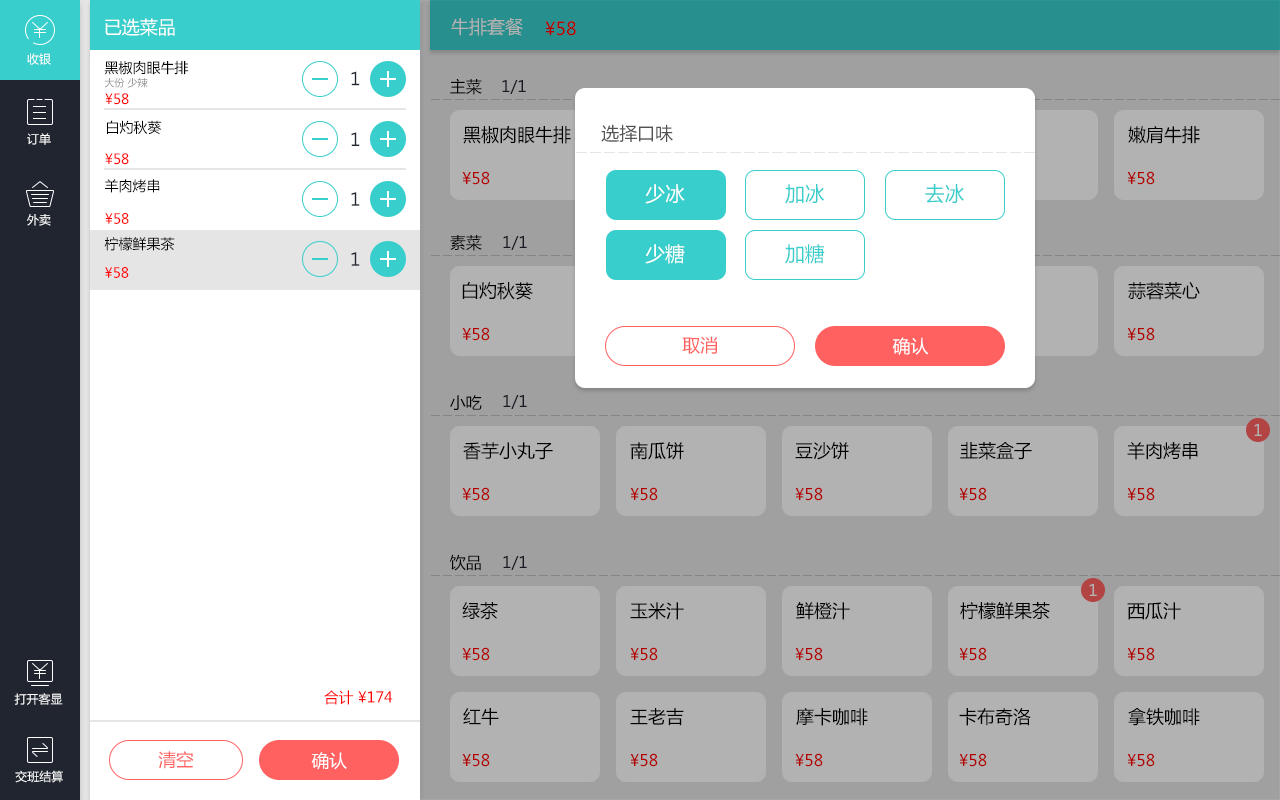
<style>
.page{position:relative;width:1280px;height:800px;background:#ffffff}
.page>*{position:absolute;margin:0}
.t1{font:18px "MicrosoftYaHei";color:#ffffff}
.t2{font:18px "MicrosoftYaHei";color:#b2b2b2}
.t3{font:18px "MicrosoftYaHei";color:#b20000}
.t4{font:12px "MicrosoftYaHei";color:#ffffff}
.t5{font:14px "MicrosoftYaHei";color:#000000}
.t6{font:10px "MicrosoftYaHei";color:#959595}
.t7{font:17.8px "MicrosoftYaHei";color:#212530}
.t8{font:16px "MicrosoftYaHei";color:#000000}
.t9{font:16px "MicrosoftYaHei";color:#212530}
.t10{font:14px "MicrosoftYaHei";color:#ff0000}
.t11{font:18px "MicrosoftYaHei";color:#000000}
.t12{font:18px "MicrosoftYaHei";color:#535353}
.t13{font:16px "MicrosoftYaHei";color:#b20000}
.t14{font:20px "MicrosoftYaHei";color:#ffffff}
.t15{font:20px "MicrosoftYaHei";color:#38cecc}
.t16{font:18px "MicrosoftYaHei";color:#ff6160}
.t17{font:16px "MicrosoftYaHei";color:#b2b2b2}
.t18{font:14.8px "MicrosoftYaHei";color:#ff0000}
.t19{font:17.8px "MicrosoftYaHei";color:#ff6160}
.t20{font:17.8px "MicrosoftYaHei";color:#ffffff}
</style>
<div class="page">
<p class="t1" style="left:105px;top:18px;width:70px;height:18px">已选菜品</p>
<p class="t2" style="left:451px;top:18px;width:72px;height:18px">牛排套餐</p>
<p class="t3" style="left:545px;top:21px;width:31px;height:15px">¥58</p>
<p class="t4" style="left:27px;top:53px;width:24px;height:12px">收银</p>
<p class="t5" style="left:104px;top:60px;width:85px;height:15px">黑椒肉眼牛排</p>
<p class="t6" style="left:104px;top:78px;width:44px;height:10px">大份 少辣</p>
<p class="t7" style="left:351px;top:71px;width:9px;height:15px">1</p>
<p class="t8" style="left:450px;top:78px;width:32px;height:17px">主菜</p>
<p class="t9" style="left:502px;top:79px;width:24px;height:15px">1/1</p>
<p class="t10" style="left:105px;top:93px;width:24px;height:12px">¥58</p>
<p class="t5" style="left:107px;top:120px;width:55px;height:15px">白灼秋葵</p>
<p class="t11" style="left:463px;top:126px;width:108px;height:18px">黑椒肉眼牛排</p>
<p class="t12" style="left:601px;top:124px;width:72px;height:18px">选择口味</p>
<p class="t11" style="left:1128px;top:126px;width:72px;height:18px">嫩肩牛排</p>
<p class="t4" style="left:27px;top:133px;width:24px;height:12px">订单</p>
<p class="t7" style="left:351px;top:132px;width:9px;height:14px">1</p>
<p class="t10" style="left:105px;top:153px;width:24px;height:12px">¥58</p>
<p class="t13" style="left:462px;top:171px;width:28px;height:14px">¥58</p>
<p class="t13" style="left:1127px;top:171px;width:28px;height:14px">¥58</p>
<p class="t5" style="left:105px;top:179px;width:55px;height:14px">羊肉烤串</p>
<p class="t14" style="left:645px;top:184px;width:40px;height:20px">少冰</p>
<p class="t15" style="left:785px;top:184px;width:40px;height:20px">加冰</p>
<p class="t15" style="left:925px;top:184px;width:39px;height:20px">去冰</p>
<p class="t7" style="left:351px;top:192px;width:9px;height:14px">1</p>
<p class="t4" style="left:27px;top:214px;width:24px;height:12px">外卖</p>
<p class="t10" style="left:105px;top:213px;width:24px;height:11px">¥58</p>
<p class="t5" style="left:104px;top:237px;width:71px;height:14px">柠檬鲜果茶</p>
<p class="t8" style="left:450px;top:235px;width:32px;height:16px">素菜</p>
<p class="t9" style="left:503px;top:235px;width:24px;height:15px">1/1</p>
<p class="t14" style="left:645px;top:244px;width:40px;height:20px">少糖</p>
<p class="t15" style="left:785px;top:244px;width:40px;height:20px">加糖</p>
<p class="t7" style="left:351px;top:252px;width:9px;height:14px">1</p>
<p class="t10" style="left:105px;top:267px;width:24px;height:11px">¥58</p>
<p class="t11" style="left:462px;top:281px;width:71px;height:19px">白灼秋葵</p>
<p class="t11" style="left:1128px;top:282px;width:72px;height:18px">蒜蓉菜心</p>
<p class="t13" style="left:462px;top:327px;width:28px;height:14px">¥58</p>
<p class="t13" style="left:1127px;top:327px;width:28px;height:14px">¥58</p>
<p class="t16" style="left:682px;top:336px;width:36px;height:18px">取消</p>
<p class="t1" style="left:892px;top:337px;width:37px;height:18px">确认</p>
<p class="t8" style="left:450px;top:395px;width:32px;height:15px">小吃</p>
<p class="t9" style="left:503px;top:394px;width:24px;height:15px">1/1</p>
<p class="t17" style="left:1254px;top:423px;width:8px;height:13px">1</p>
<p class="t11" style="left:463px;top:442px;width:90px;height:18px">香芋小丸子</p>
<p class="t11" style="left:630px;top:442px;width:54px;height:18px">南瓜饼</p>
<p class="t11" style="left:795px;top:442px;width:54px;height:18px">豆沙饼</p>
<p class="t11" style="left:960px;top:442px;width:72px;height:18px">韭菜盒子</p>
<p class="t11" style="left:1127px;top:442px;width:71px;height:18px">羊肉烤串</p>
<p class="t13" style="left:462px;top:487px;width:28px;height:14px">¥58</p>
<p class="t13" style="left:630px;top:487px;width:28px;height:14px">¥58</p>
<p class="t13" style="left:795px;top:487px;width:28px;height:14px">¥58</p>
<p class="t13" style="left:959px;top:487px;width:28px;height:14px">¥58</p>
<p class="t13" style="left:1127px;top:487px;width:28px;height:14px">¥58</p>
<p class="t8" style="left:449px;top:554px;width:32px;height:17px">饮品</p>
<p class="t9" style="left:503px;top:555px;width:24px;height:15px">1/1</p>
<p class="t17" style="left:1089px;top:583px;width:8px;height:13px">1</p>
<p class="t11" style="left:462px;top:602px;width:36px;height:18px">绿茶</p>
<p class="t11" style="left:630px;top:602px;width:54px;height:18px">玉米汁</p>
<p class="t11" style="left:796px;top:602px;width:54px;height:18px">鲜橙汁</p>
<p class="t11" style="left:960px;top:602px;width:90px;height:18px">柠檬鲜果茶</p>
<p class="t11" style="left:1127px;top:602px;width:54px;height:18px">西瓜汁</p>
<p class="t13" style="left:462px;top:647px;width:28px;height:14px">¥58</p>
<p class="t13" style="left:630px;top:647px;width:28px;height:14px">¥58</p>
<p class="t13" style="left:795px;top:647px;width:28px;height:14px">¥58</p>
<p class="t13" style="left:959px;top:647px;width:28px;height:14px">¥58</p>
<p class="t13" style="left:1127px;top:647px;width:28px;height:14px">¥58</p>
<p class="t4" style="left:14px;top:693px;width:49px;height:12px">打开客显</p>
<p class="t18" style="left:324px;top:690px;width:69px;height:15px">合计 ¥174</p>
<p class="t11" style="left:463px;top:708px;width:36px;height:18px">红牛</p>
<p class="t11" style="left:630px;top:708px;width:54px;height:18px">王老吉</p>
<p class="t11" style="left:796px;top:708px;width:72px;height:18px">摩卡咖啡</p>
<p class="t11" style="left:959px;top:708px;width:72px;height:18px">卡布奇洛</p>
<p class="t11" style="left:1128px;top:708px;width:72px;height:18px">拿铁咖啡</p>
<p class="t19" style="left:158px;top:751px;width:36px;height:18px">清空</p>
<p class="t20" style="left:311px;top:752px;width:36px;height:18px">确认</p>
<p class="t13" style="left:462px;top:753px;width:28px;height:14px">¥58</p>
<p class="t13" style="left:630px;top:753px;width:28px;height:14px">¥58</p>
<p class="t13" style="left:795px;top:753px;width:28px;height:14px">¥58</p>
<p class="t13" style="left:959px;top:753px;width:28px;height:14px">¥58</p>
<p class="t13" style="left:1127px;top:753px;width:28px;height:14px">¥58</p>
<p class="t4" style="left:15px;top:770px;width:48px;height:13px">交班结算</p>
</div>
